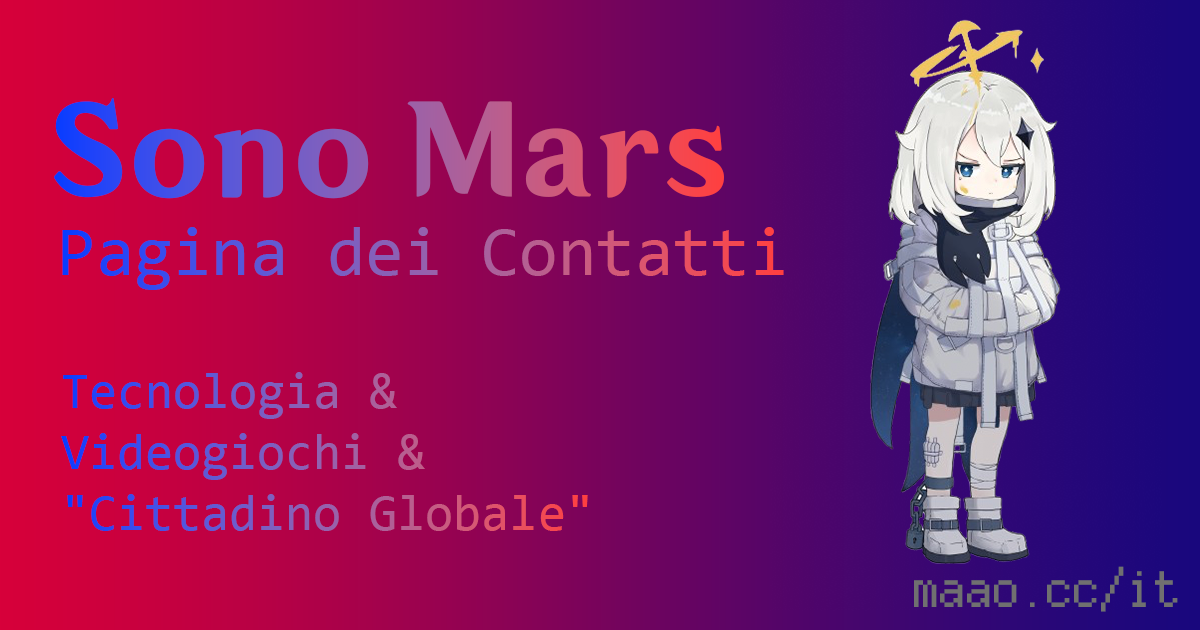
<style>
.page{position:relative;width:1200px;height:630px}
.page>*{position:absolute;margin:0}
.t1{font:120.1px "HYWenHei-HEW"}
.t2{font:70px "Consolas"}
.t3{font:51px "Consolas"}
.t4{font:53.5px "ZLabsBitmap_11x12px";color:#707070}
</style>
<div class="page">
<p class="t1" style="left:54px;top:98px;width:670px;height:101px">Sono Mars</p>
<p class="t2" style="left:62px;top:227px;width:722px;height:63px">Pagina dei Contatti</p>
<p class="t3" style="left:61px;top:372px;width:527px;height:159px">Tecnologia &amp;<br>Videogiochi &amp;<br>"Cittadino Globale"</p>
<p class="t4" style="left:914px;top:566px;width:264px;height:46px">maao.cc/it</p>
</div>
